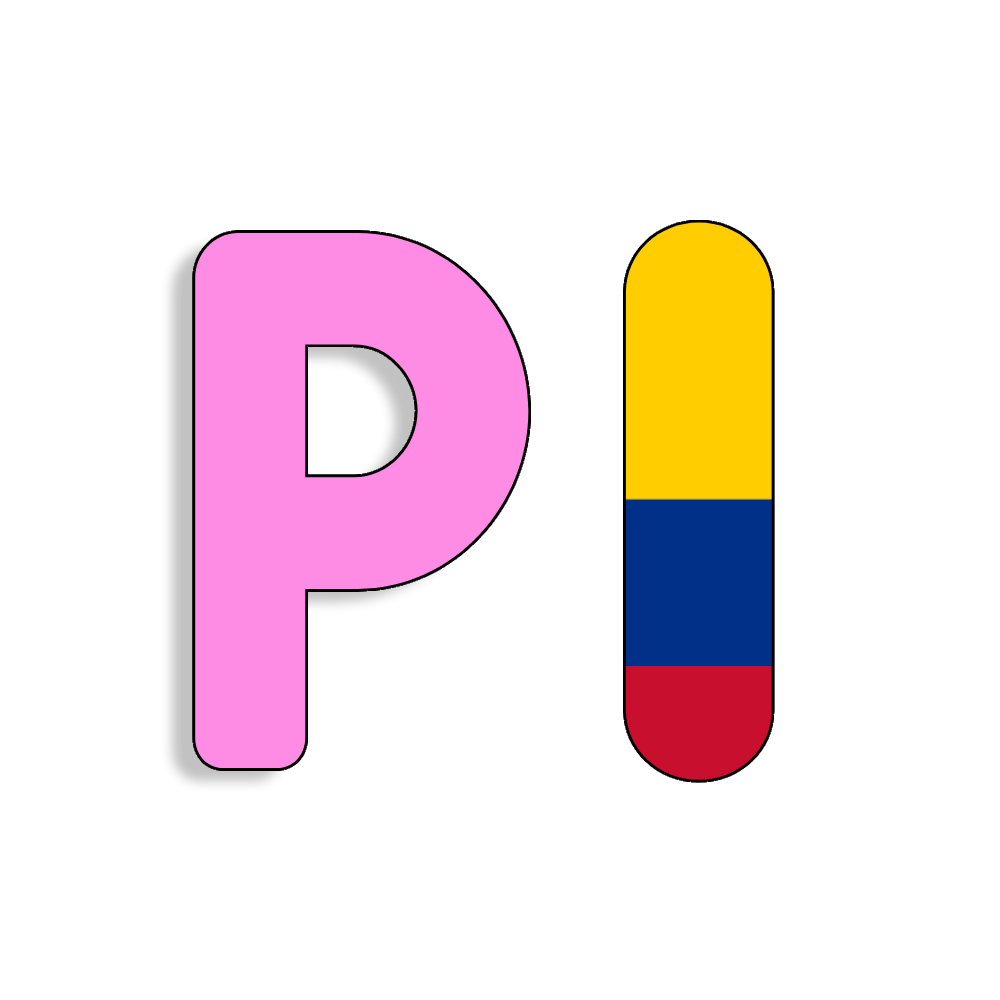
<style>
.page{position:relative;width:1000px;height:1000px;background:#ffffff}
.page>*{position:absolute;margin:0}
.t1{font:722.8px "Jellee-Roman";scale:1.05 1}
.t2{font:759px "Fulbo-Argenta";color:#ff8ce4}
</style>
<div class="page">
<p class="t1" style="left:625px;top:222px;width:147px;height:558px">I</p>
<p class="t2" style="left:195px;top:232px;width:334px;height:536px">P</p>
</div>
